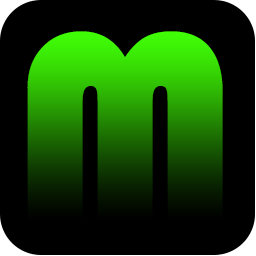
<style>
.page{position:relative;width:256px;height:256px;background:#000000}
.page>*{position:absolute;margin:0}
.t1{font:276px "Bauhaus93";letter-spacing:0.05em}
</style>
<div class="page">
<p class="t1" style="left:27px;top:31px;width:196px;height:189px">M</p>
</div>
